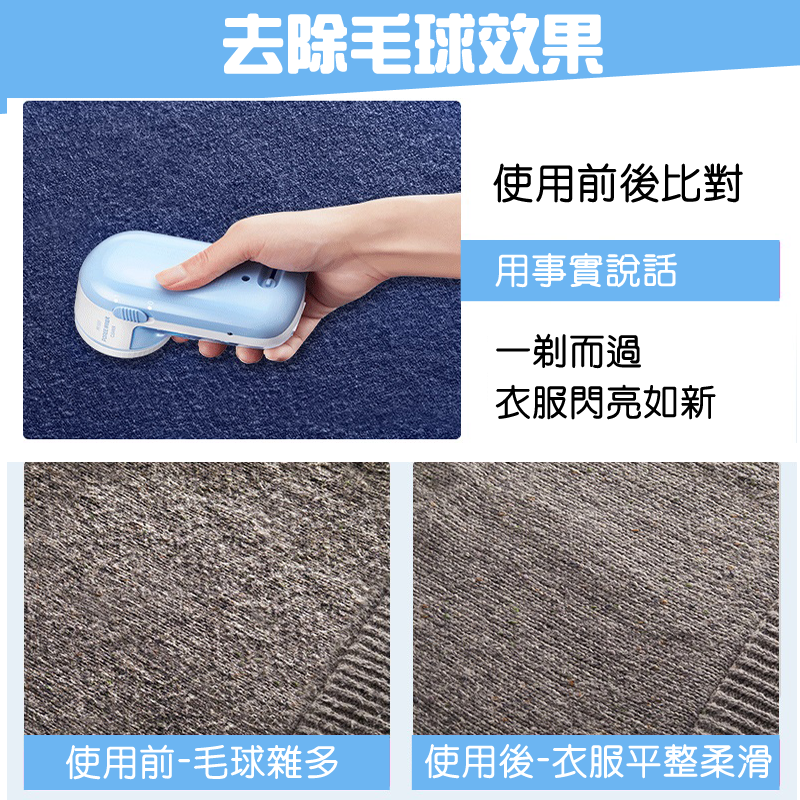
<style>
.page{position:relative;width:800px;height:800px;background:#ffffff}
.page>*{position:absolute;margin:0}
.t1{font:62.2px "HanWangZonYi";color:#ffffff;font-weight:bold}
.t2{font:41px "HanWangYenLight";color:#000000;font-weight:bold}
.t3{font:36px "HanWangYenLight";color:#ffffff;font-weight:bold}
.t4{font:36px "HanWangYenLight";color:#000000;font-weight:bold}
</style>
<div class="page">
<p class="t1" style="left:223px;top:13px;width:380px;height:61px">去除毛球效果</p>
<p class="t2" style="left:493px;top:163px;width:250px;height:40px">使用前後比對</p>
<p class="t3" style="left:495px;top:253px;width:182px;height:35px">用事實說話</p>
<p class="t4" style="left:495px;top:333px;width:221px;height:87px">一剃而過<br>衣服閃亮如新</p>
<p class="t3" style="left:66px;top:744px;width:272px;height:36px">使用前-毛球雜多</p>
<p class="t3" style="left:425px;top:743px;width:347px;height:36px">使用後-衣服平整柔滑</p>
</div>
